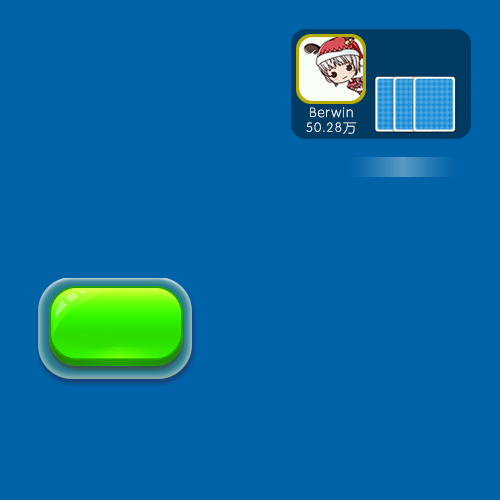
<style>
.page{position:relative;width:500px;height:500px;background:#0062a7}
.page>*{position:absolute;margin:0}
.t1{font:13.9px "STYuanti-SC-Light";letter-spacing:0.04em;color:#f5f5f4}
.t2{font:13.5px "STYuanti-SC-Light";letter-spacing:0.04em;color:#f5f5f4;scale:1.04 1}
</style>
<div class="page">
<p class="t1" style="left:310px;top:107px;width:43px;height:11px">Berwin</p>
<p class="t2" style="left:306px;top:122px;width:51px;height:12px">50.28万</p>
</div>
